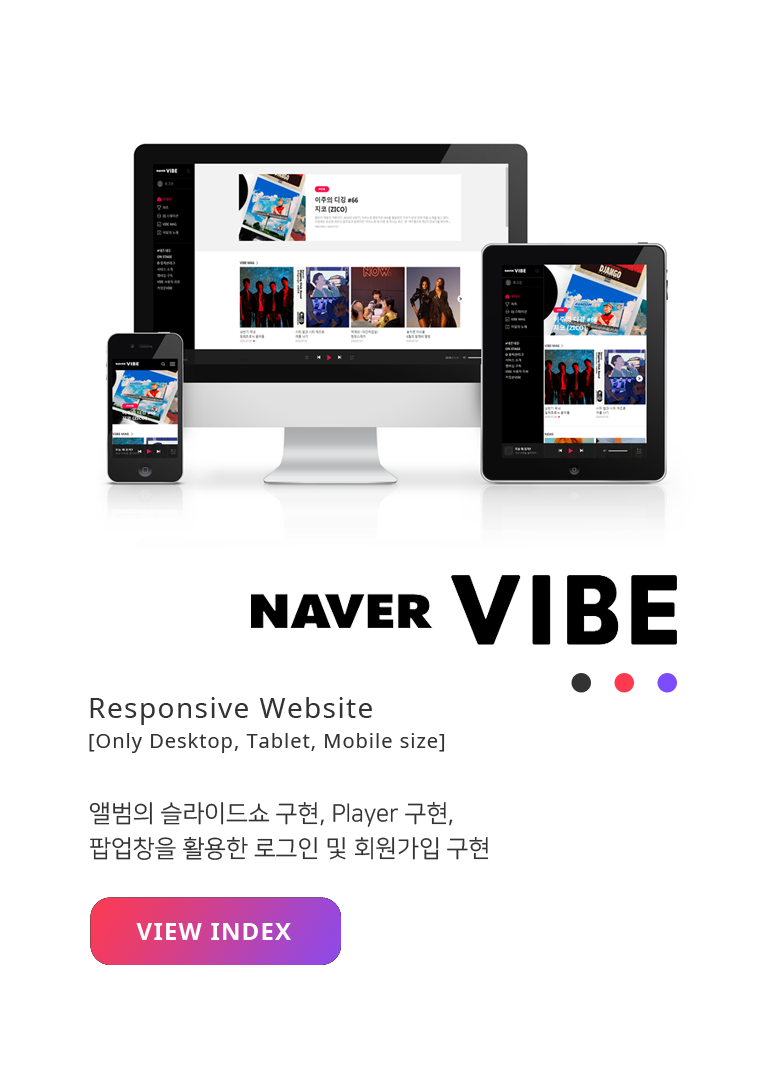
<style>
.page{position:relative;width:767px;height:1080px;background:#ffffff}
.page>*{position:absolute;margin:0}
.t1{font:20px/30px "NotoSans-Regular";letter-spacing:0.05em;color:#333333}
.t2{font:28px/40px "NotoSans-Regular";letter-spacing:0.05em;color:#333333}
.t3{font:24px/35px "NanumSquareR";color:#333333}
.t4{font:24px "NotoSans-Bold";letter-spacing:0.05em;color:#ffffff}
</style>
<div class="page">
<p class="t1" style="left:89px;top:697px;width:356px;height:56px"><span class="t2">Responsive Website<br></span>[Only Desktop, Tablet, Mobile size]</p>
<p class="t3" style="left:89px;top:801px;width:400px;height:59px">앨범의 슬라이드쇼 구현, Player 구현, <br>팝업창을 활용한 로그인 및 회원가입 구현</p>
<p class="t4" style="left:136px;top:923px;width:155px;height:17px">VIEW INDEX</p>
</div>
